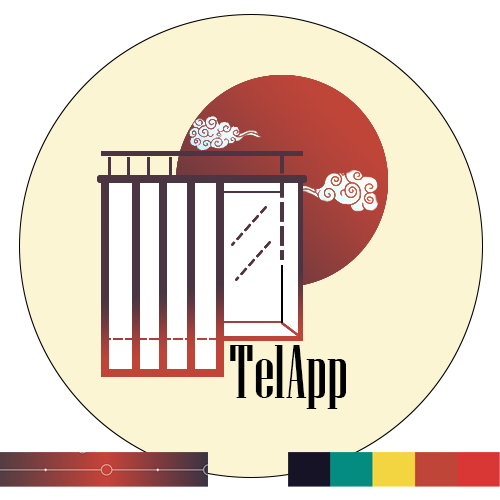
<style>
.page{position:relative;width:500px;height:500px;background:#fcf5d3}
.page>*{position:absolute;margin:0}
.t1{font:75px "NiagaraSolid-Reg";color:#000000}
</style>
<div class="page">
<p class="t1" style="left:230px;top:345px;width:116px;height:64px">TelApp</p>
</div>
